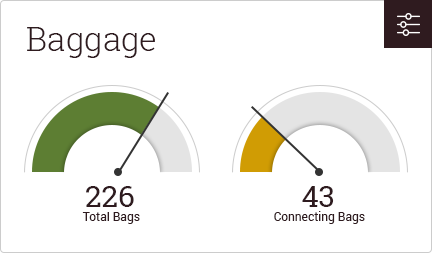
<style>
.page{position:relative;width:432px;height:253px;background:#ffffff}
.page>*{position:absolute;margin:0}
.t1{font:33px "RobotoSlab-Light";color:#2f1b1f}
.t2{font:30px "RobotoSlab-Regular";color:#2f1b1f}
.t3{font:12px "Roboto-Regular";color:#2f1b1f}
</style>
<div class="page">
<p class="t1" style="left:27px;top:27px;width:128px;height:31px">Baggage</p>
<p class="t2" style="left:86px;top:186px;width:48px;height:21px">226</p>
<p class="t2" style="left:302px;top:186px;width:32px;height:21px">43</p>
<p class="t3" style="left:82px;top:212px;width:58px;height:12px">Total Bags</p>
<p class="t3" style="left:274px;top:211px;width:91px;height:13px">Connecting Bags</p>
</div>
